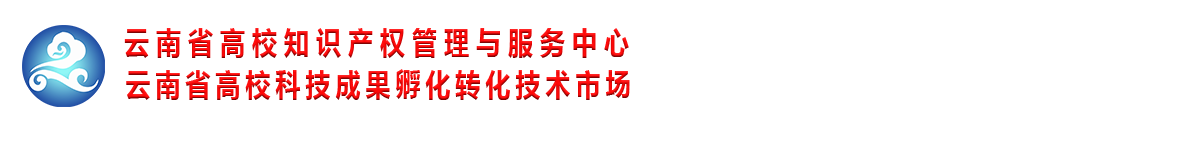
<style>
.page{position:relative;width:1200px;height:150px;background:#ffffff}
.page>*{position:absolute;margin:0}
.t1{font:30.7px "MicrosoftYaHei-Bold";letter-spacing:0.3em;scale:0.8 1}
.t2{font:30.7px "MicrosoftYaHei-Bold";letter-spacing:0.22em;scale:0.8 1}
</style>
<div class="page">
<p class="t1" style="left:124px;top:28px;width:505px;height:30px">云南省高校知识产权管理与服务中心</p>
<p class="t2" style="left:126px;top:69px;width:504px;height:31px">云南省高校科技成果孵化转化技术市场</p>
</div>
